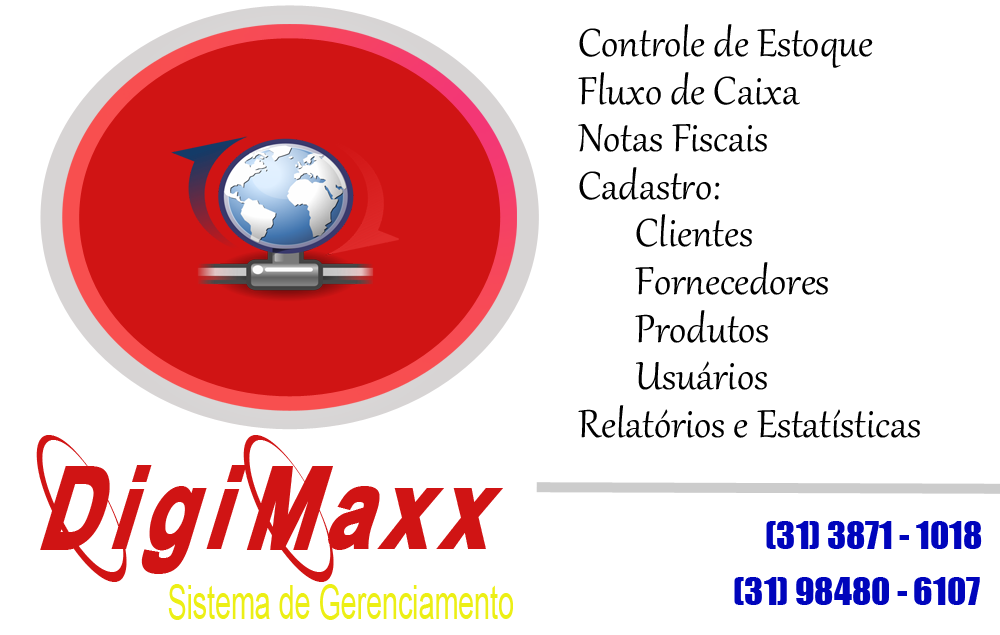
<style>
.page{position:relative;width:1000px;height:635px;background:#ffffff}
.page>*{position:absolute;margin:0}
.t1{font:48px/47.6px "Gabriola";color:#000000}
.t2{font:47.1px/70.7px "ArialMT";color:#ecef15;scale:0.61 1}
.t3{font:137.5px "13Misa";letter-spacing:0.05em;color:#d01414;scale:0.61 1}
.t4{font:36px "Impact";color:#0005bc}
</style>
<div class="page">
<p class="t1" style="left:578px;top:24px;width:342px;height:414px">Controle de Estoque<br>Fluxo de Caixa<br>Notas Fiscais<br>Cadastro:<br> Clientes <br> Fornecedores<br> Produtos <br> Usuários<br>Relatórios e Estatísticas</p>
<p class="t2" style="left:36px;top:435px;width:477px;height:185px"><span class="t3">DigiMaxx <br>                  </span>Sistema de Gerenciamento</p>
<p class="t4" style="left:766px;top:521px;width:216px;height:28px">(31) 3871 - 1018</p>
<p class="t4" style="left:734px;top:577px;width:246px;height:28px">(31) 98480 - 6107</p>
</div>
